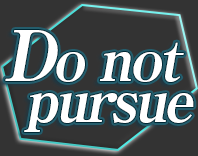
<style>
.page{position:relative;width:198px;height:156px;background:#333333}
.page>*{position:absolute;margin:0}
.t1{font:60px/50px "RyuminPro-ExBold";letter-spacing:-0.06em;color:#ffffff;font-style:italic}
.t2{font:70px/50px "RyuminPro-ExBold";letter-spacing:-0.06em;color:#ffffff;font-style:italic}
</style>
<div class="page">
<p class="t1" style="left:5px;top:30px;width:189px;height:102px;text-align:center"><span class="t2">D</span>o not<br>  pursue</p>
</div>
